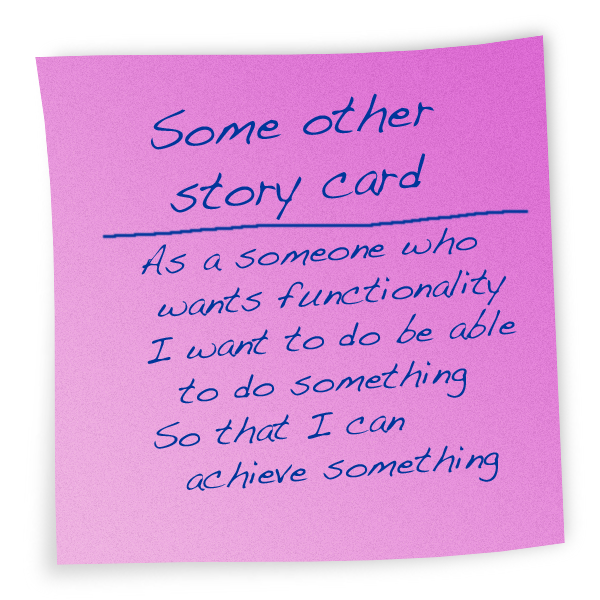
<style>
.page{position:relative;width:600px;height:600px}
.page>*{position:absolute;margin:0}
.t1{font:53px "Handwriting-Dakota";color:#00369a;scale:0.94 1}
.t2{font:36.2px "Handwriting-Dakota";color:#00369a}
</style>
<div class="page">
<p class="t1" style="left:151px;top:93px;width:283px;height:127px;text-align:center;rotate:-5deg">Some other<br>story card</p>
<p class="t2" style="left:141px;top:227px;width:376px;height:264px;rotate:-4deg">As a someone who<br> wants functionality <br>I want to do be able<br>  to do something<br>So that I can<br>  achieve something</p>
</div>
